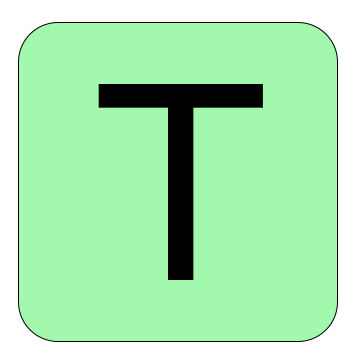
<style>
.page{position:relative;width:360px;height:360px;background:#a2f8ad}
.page>*{position:absolute;margin:0}
.t1{font:280px "Larsseit";color:#000000}
</style>
<div class="page">
<p class="t1" style="left:98px;top:84px;width:165px;height:196px">T</p>
</div>
